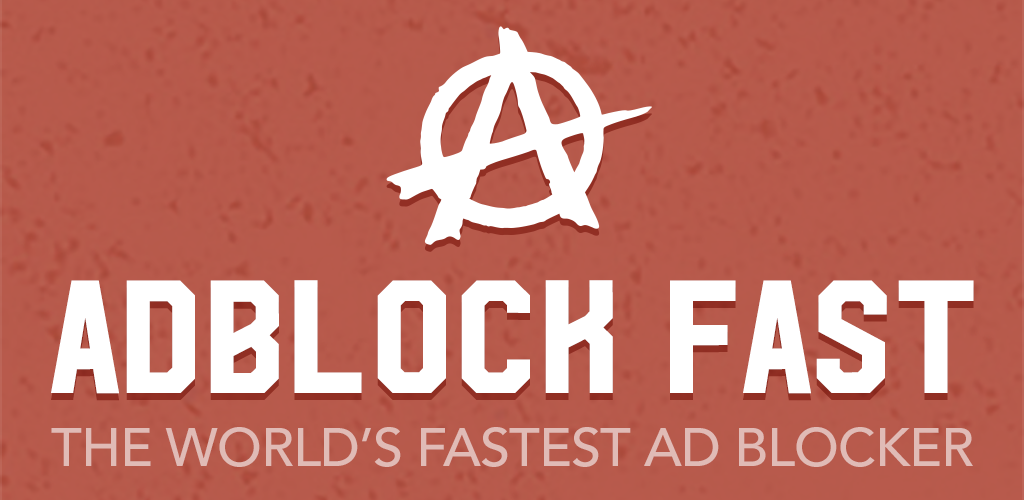
<style>
.page{position:relative;width:1024px;height:500px}
.page>*{position:absolute;margin:0}
.t1{font:160.5px "HudsonNY";color:#ffffff}
.t2{font:53.7px "Avenir-Medium";letter-spacing:-0.016em;color:#e0bbb6}
</style>
<div class="page">
<p class="t1" style="left:51px;top:280px;width:923px;height:114px">ADBLOCK FAST</p>
<p class="t2" style="left:51px;top:427px;width:922px;height:40px">THE WORLD’S FASTEST AD BLOCKER</p>
</div>
